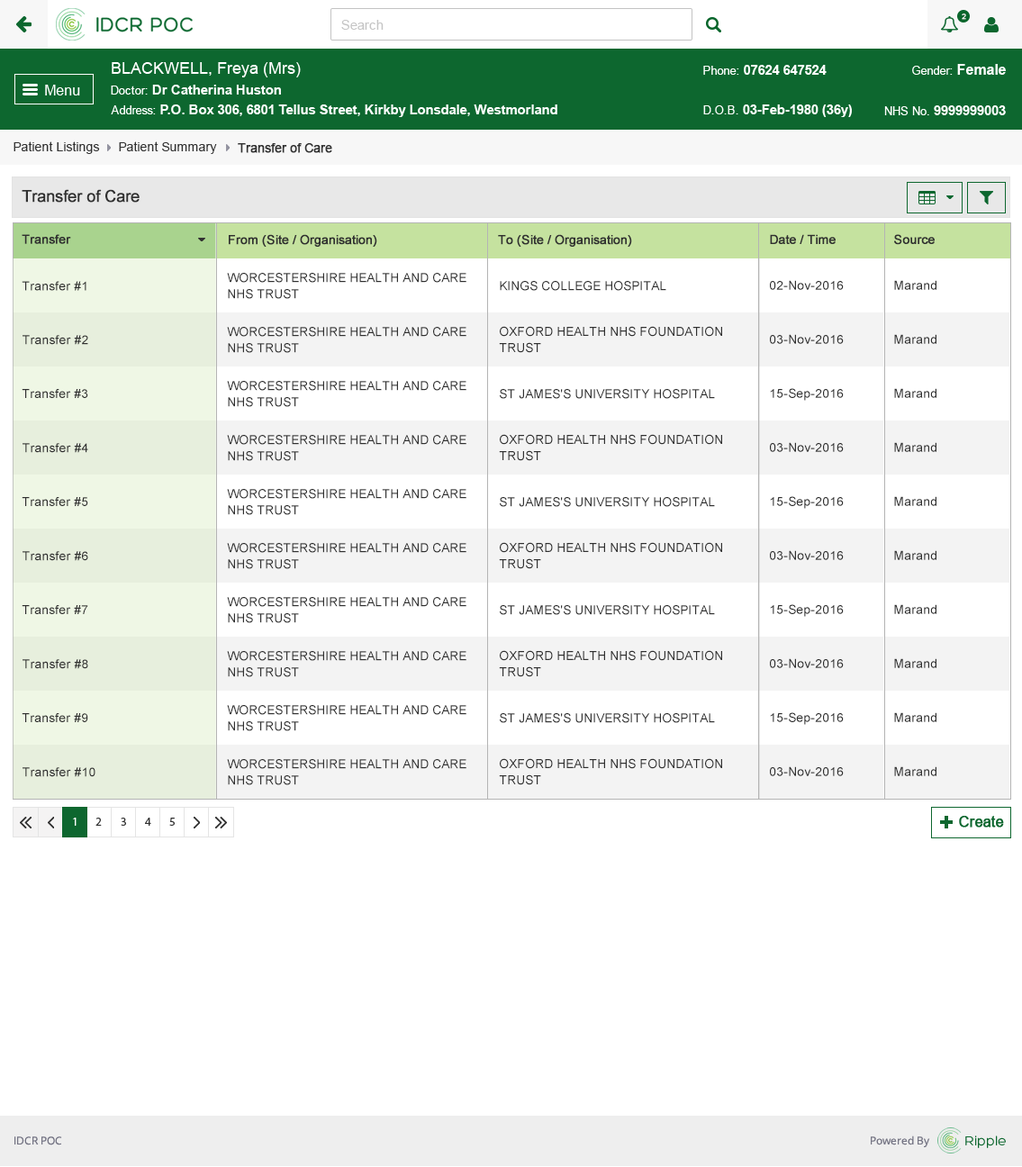
<style>
.page{position:relative;width:1022px;height:1167px;background:#ffffff}
.page>*{position:absolute;margin:0}
.t1{font:12.6px "ArialMT";color:#313131}
.t2{font:12.6px "ArialMT";color:#313131;font-weight:bold}
.t3{font:16.2px "ArialMT";color:#303030;font-weight:bold}
.t4{font:12.6px "ArialMT";color:#303030;font-weight:bold}
.t5{font:12.6px "ArialMT";color:#303030}
.t6{font:12.6px/16.2px "ArialMT";color:#303030}
</style>
<div class="page">
<p class="t1" style="left:14px;top:141px;width:86px;height:13px">Patient Listings</p>
<p class="t1" style="left:119px;top:141px;width:98px;height:13px">Patient Summary</p>
<p class="t2" style="left:238px;top:143px;width:94px;height:10px">Transfer of Care</p>
<p class="t3" style="left:22px;top:189px;width:118px;height:14px">Transfer of Care</p>
<p class="t4" style="left:22px;top:234px;width:49px;height:10px">Transfer</p>
<p class="t4" style="left:229px;top:234px;width:148px;height:13px">From (Site / Organisation)</p>
<p class="t4" style="left:498px;top:234px;width:134px;height:13px">To (Site / Organisation)</p>
<p class="t4" style="left:770px;top:234px;width:66px;height:10px">Date / Time</p>
<p class="t4" style="left:894px;top:234px;width:41px;height:11px">Source</p>
<p class="t5" style="left:22px;top:281px;width:64px;height:10px">Transfer #1</p>
<p class="t6" style="left:227px;top:273px;width:239px;height:26px">WORCESTERSHIRE HEALTH AND CARE <br>NHS TRUST</p>
<p class="t5" style="left:500px;top:281px;width:166px;height:10px">KINGS COLLEGE HOSPITAL</p>
<p class="t5" style="left:770px;top:280px;width:74px;height:10px">02-Nov-2016</p>
<p class="t5" style="left:894px;top:280px;width:42px;height:10px">Marand</p>
<p class="t6" style="left:227px;top:327px;width:239px;height:26px">WORCESTERSHIRE HEALTH AND CARE <br>NHS TRUST</p>
<p class="t6" style="left:499px;top:326px;width:223px;height:27px">OXFORD HEALTH NHS FOUNDATION <br>TRUST</p>
<p class="t5" style="left:23px;top:335px;width:65px;height:10px">Transfer #2</p>
<p class="t5" style="left:770px;top:334px;width:74px;height:10px">03-Nov-2016</p>
<p class="t5" style="left:894px;top:334px;width:42px;height:10px">Marand</p>
<p class="t5" style="left:22px;top:389px;width:66px;height:9px">Transfer #3</p>
<p class="t6" style="left:227px;top:381px;width:239px;height:26px">WORCESTERSHIRE HEALTH AND CARE <br>NHS TRUST</p>
<p class="t5" style="left:500px;top:389px;width:215px;height:10px">ST JAMES'S UNIVERSITY HOSPITAL</p>
<p class="t5" style="left:770px;top:388px;width:74px;height:13px">15-Sep-2016</p>
<p class="t5" style="left:894px;top:388px;width:42px;height:10px">Marand</p>
<p class="t6" style="left:227px;top:435px;width:239px;height:26px">WORCESTERSHIRE HEALTH AND CARE <br>NHS TRUST</p>
<p class="t6" style="left:499px;top:434px;width:223px;height:27px">OXFORD HEALTH NHS FOUNDATION <br>TRUST</p>
<p class="t5" style="left:23px;top:443px;width:65px;height:10px">Transfer #4</p>
<p class="t5" style="left:770px;top:442px;width:74px;height:10px">03-Nov-2016</p>
<p class="t5" style="left:894px;top:442px;width:42px;height:10px">Marand</p>
<p class="t5" style="left:22px;top:497px;width:66px;height:9px">Transfer #5</p>
<p class="t6" style="left:227px;top:489px;width:239px;height:26px">WORCESTERSHIRE HEALTH AND CARE <br>NHS TRUST</p>
<p class="t5" style="left:500px;top:497px;width:215px;height:10px">ST JAMES'S UNIVERSITY HOSPITAL</p>
<p class="t5" style="left:770px;top:496px;width:74px;height:13px">15-Sep-2016</p>
<p class="t5" style="left:894px;top:496px;width:42px;height:10px">Marand</p>
<p class="t6" style="left:227px;top:543px;width:239px;height:26px">WORCESTERSHIRE HEALTH AND CARE <br>NHS TRUST</p>
<p class="t6" style="left:499px;top:542px;width:223px;height:27px">OXFORD HEALTH NHS FOUNDATION <br>TRUST</p>
<p class="t5" style="left:23px;top:551px;width:65px;height:10px">Transfer #6</p>
<p class="t5" style="left:770px;top:550px;width:74px;height:10px">03-Nov-2016</p>
<p class="t5" style="left:894px;top:550px;width:42px;height:10px">Marand</p>
<p class="t5" style="left:22px;top:605px;width:66px;height:9px">Transfer #7</p>
<p class="t6" style="left:227px;top:597px;width:239px;height:26px">WORCESTERSHIRE HEALTH AND CARE <br>NHS TRUST</p>
<p class="t5" style="left:500px;top:605px;width:215px;height:10px">ST JAMES'S UNIVERSITY HOSPITAL</p>
<p class="t5" style="left:770px;top:604px;width:74px;height:13px">15-Sep-2016</p>
<p class="t5" style="left:894px;top:604px;width:42px;height:10px">Marand</p>
<p class="t6" style="left:227px;top:651px;width:239px;height:26px">WORCESTERSHIRE HEALTH AND CARE <br>NHS TRUST</p>
<p class="t6" style="left:499px;top:650px;width:223px;height:27px">OXFORD HEALTH NHS FOUNDATION <br>TRUST</p>
<p class="t5" style="left:23px;top:659px;width:65px;height:10px">Transfer #8</p>
<p class="t5" style="left:770px;top:658px;width:74px;height:10px">03-Nov-2016</p>
<p class="t5" style="left:894px;top:658px;width:42px;height:10px">Marand</p>
<p class="t5" style="left:22px;top:713px;width:66px;height:9px">Transfer #9</p>
<p class="t6" style="left:227px;top:705px;width:239px;height:26px">WORCESTERSHIRE HEALTH AND CARE <br>NHS TRUST</p>
<p class="t5" style="left:500px;top:713px;width:215px;height:10px">ST JAMES'S UNIVERSITY HOSPITAL</p>
<p class="t5" style="left:770px;top:712px;width:74px;height:13px">15-Sep-2016</p>
<p class="t5" style="left:894px;top:712px;width:42px;height:10px">Marand</p>
<p class="t6" style="left:227px;top:759px;width:239px;height:26px">WORCESTERSHIRE HEALTH AND CARE <br>NHS TRUST</p>
<p class="t6" style="left:499px;top:758px;width:223px;height:27px">OXFORD HEALTH NHS FOUNDATION <br>TRUST</p>
<p class="t5" style="left:23px;top:767px;width:72px;height:10px">Transfer #10</p>
<p class="t5" style="left:770px;top:766px;width:74px;height:10px">03-Nov-2016</p>
<p class="t5" style="left:894px;top:766px;width:42px;height:10px">Marand</p>
</div>
